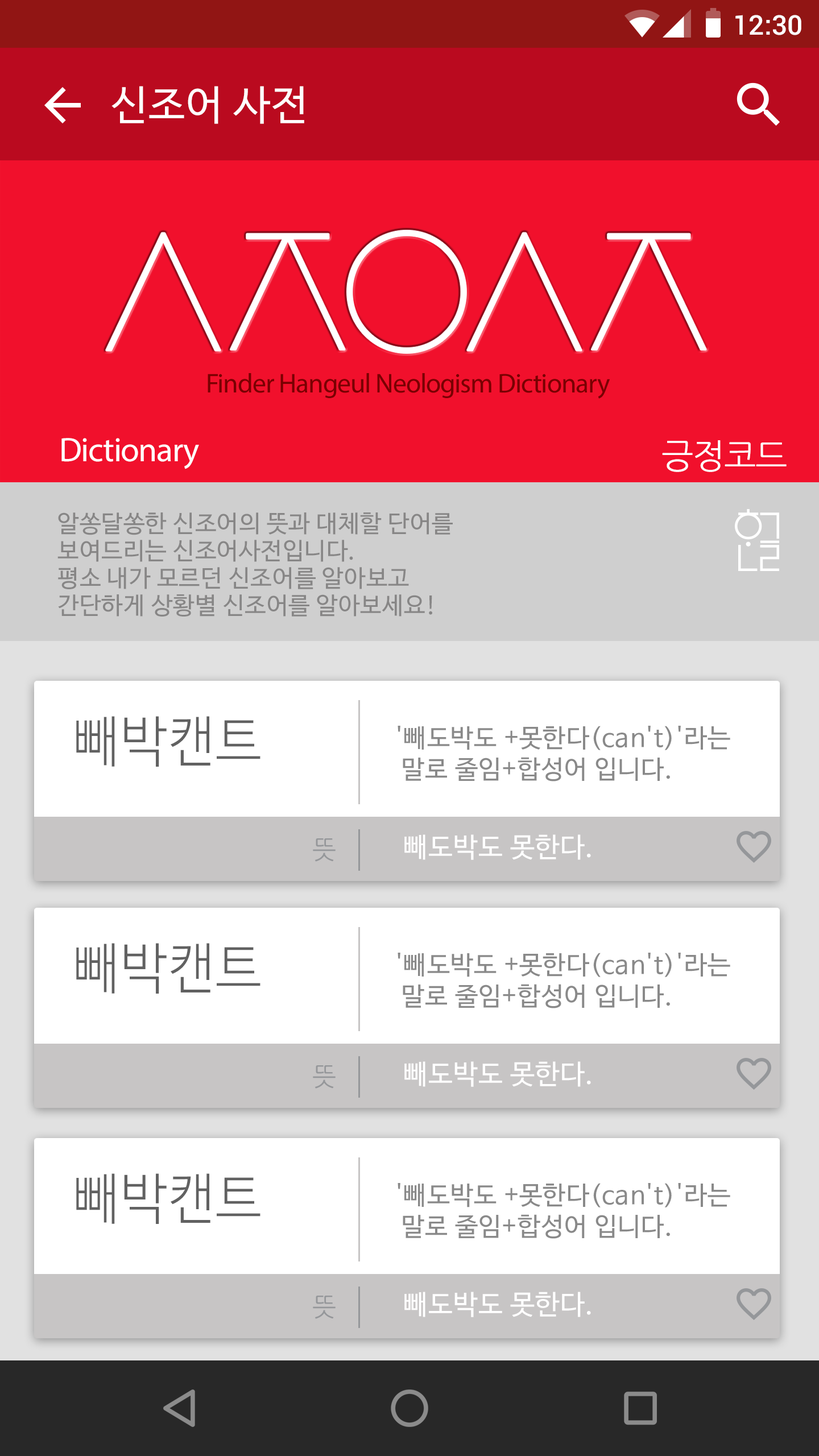
<style>
.page{position:relative;width:819px;height:1456px;background:#ffffff}
.page>*{position:absolute;margin:0}
.t1{font:27.3px "Roboto-Medium";color:#ffffff}
.t2{font:40.9px "NanumBarunGothic";letter-spacing:0.025em;color:#ffffff}
.t3{font:27.3px "MyriadPro-Regular";letter-spacing:-0.025em;color:#790101}
.t4{font:34.1px "MyriadPro-Regular";letter-spacing:-0.025em;color:#ffffff}
.t5{font:34.1px "NanumGothic";letter-spacing:-0.025em;color:#ffffff}
.t6{font:23.9px/27.3px "NanumBarunGothic";letter-spacing:0.025em;color:#878686}
.t7{font:55.1px "NanumBarunGothicLight";letter-spacing:0.025em;color:#616161;scale:0.94 1}
.t8{font:25.6px/31.3px "NanumBarunGothic";letter-spacing:0.025em;color:#898989}
.t9{font:25.5px "NanumGothic";letter-spacing:-0.025em;color:#95979a}
.t10{font:27.3px "NanumBarunGothic";letter-spacing:0.025em;color:#ffffff}
</style>
<div class="page">
<p class="t1" style="left:735px;top:15px;width:66px;height:20px">12:30</p>
<p class="t2" style="left:111px;top:86px;width:193px;height:38px">신조어 사전</p>
<p class="t3" style="left:208px;top:373px;width:402px;height:26px">Finder Hangeul Neologism Dictionary</p>
<p class="t4" style="left:61px;top:438px;width:138px;height:31px">Dictionary</p>
<p class="t5" style="left:662px;top:440px;width:125px;height:32px">긍정코드</p>
<p class="t6" style="left:57px;top:512px;width:396px;height:105px">알쏭달쏭한 신조어의 뜻과 대체할 단어를 <br>보여드리는 신조어사전입니다.<br>평소 내가 모르던 신조어를 알아보고 <br>간단하게 상황별 신조어를 알아보세요!</p>
<p class="t7" style="left:76px;top:716px;width:184px;height:51px">빼박캔트</p>
<p class="t8" style="left:398px;top:726px;width:332px;height:55px">'빼도박도 +못한다(can't)'라는 <br> 말로 줄임+합성어 입니다.</p>
<p class="t9" style="left:313px;top:838px;width:23px;height:24px">뜻</p>
<p class="t10" style="left:404px;top:834px;width:187px;height:26px">빼도박도 못한다.</p>
<p class="t7" style="left:76px;top:943px;width:184px;height:51px">빼박캔트</p>
<p class="t8" style="left:398px;top:953px;width:332px;height:55px">'빼도박도 +못한다(can't)'라는 <br> 말로 줄임+합성어 입니다.</p>
<p class="t10" style="left:404px;top:1061px;width:187px;height:26px">빼도박도 못한다.</p>
<p class="t9" style="left:313px;top:1065px;width:23px;height:24px">뜻</p>
<p class="t7" style="left:76px;top:1173px;width:184px;height:51px">빼박캔트</p>
<p class="t8" style="left:398px;top:1183px;width:332px;height:56px">'빼도박도 +못한다(can't)'라는 <br> 말로 줄임+합성어 입니다.</p>
<p class="t9" style="left:313px;top:1296px;width:23px;height:23px">뜻</p>
<p class="t10" style="left:404px;top:1292px;width:187px;height:25px">빼도박도 못한다.</p>
</div>
